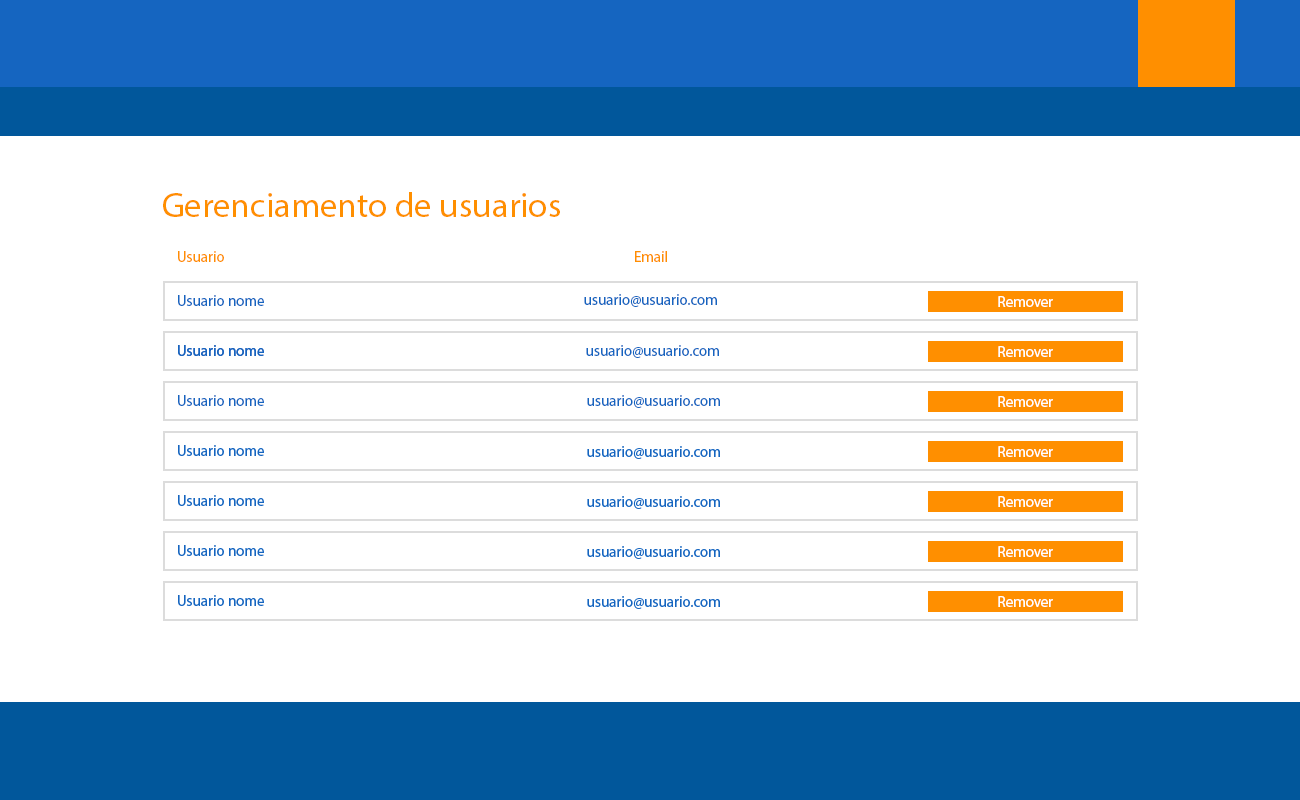
<style>
.page{position:relative;width:1300px;height:800px;background:#ffffff}
.page>*{position:absolute;margin:0}
.t1{font:35px "MyriadPro-Regular";color:#ff8f00}
.t2{font:15px "MyriadPro-Regular";color:#ff8f00}
.t3{font:15px "MyriadPro-Regular";color:#1565c0}
.t4{font:15px "MyriadPro-Regular";color:#ffffff}
</style>
<div class="page">
<p class="t1" style="left:163px;top:192px;width:397px;height:25px">Gerenciamento de usuarios</p>
<p class="t2" style="left:178px;top:251px;width:46px;height:11px">Usuario</p>
<p class="t2" style="left:635px;top:251px;width:32px;height:11px">Email</p>
<p class="t3" style="left:584px;top:294px;width:133px;height:13px">usuario@usuario.com</p>
<p class="t3" style="left:178px;top:295px;width:86px;height:11px">Usuario nome</p>
<p class="t4" style="left:998px;top:296px;width:55px;height:11px">Remover</p>
<p class="t3" style="left:178px;top:345px;width:86px;height:11px">Usuario nome</p>
<p class="t3" style="left:178px;top:345px;width:86px;height:11px">Usuario nome</p>
<p class="t3" style="left:586px;top:345px;width:133px;height:13px">usuario@usuario.com</p>
<p class="t4" style="left:998px;top:346px;width:55px;height:11px">Remover</p>
<p class="t4" style="left:998px;top:346px;width:55px;height:11px">Remover</p>
<p class="t3" style="left:178px;top:395px;width:86px;height:11px">Usuario nome</p>
<p class="t3" style="left:587px;top:395px;width:133px;height:13px">usuario@usuario.com</p>
<p class="t4" style="left:998px;top:396px;width:55px;height:11px">Remover</p>
</div>
